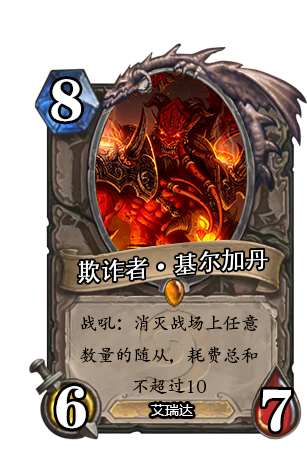
<style>
.page{position:relative;width:307px;height:465px;background:#ffffff}
.page>*{position:absolute;margin:0}
.t1{font:60px "FZCSJW--GB1-0";color:#ffffff}
.t2{font:24px "AdobeHeitiStd-Regular";color:#ffffff}
.t3{font:18px "AdobeKaitiStd-Regular";color:#000000}
.t4{font:14px "MicrosoftYaHei";color:#ffffff}
</style>
<div class="page">
<p class="t1" style="left:51px;top:79px;width:30px;height:43px">8</p>
<p class="t2" style="left:78px;top:249px;width:190px;height:34px">欺诈者·基尔加丹</p>
<p class="t3" style="left:80px;top:315px;width:178px;height:79px;text-align:center">战吼：消灭战场上任意<br>数量的随从，耗费总和<br>不超过10</p>
<p class="t1" style="left:56px;top:386px;width:30px;height:43px">6</p>
<p class="t1" style="left:262px;top:389px;width:29px;height:43px">7</p>
<p class="t4" style="left:151px;top:404px;width:42px;height:12px">艾瑞达</p>
</div>
